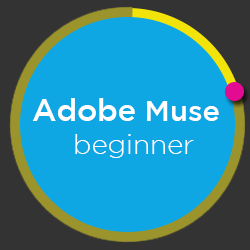
<style>
.page{position:relative;width:250px;height:250px;background:#0ea7e4}
.page>*{position:absolute;margin:0}
.t1{font:27.8px "GothamLight";color:#ffffff}
.t2{font:30.6px "GothamMedium";color:#ffffff}
.t3{font:29.2px "GothamMedium";color:#ffffff}
</style>
<div class="page">
<p class="t1" style="left:32px;top:98px;width:187px;height:60px"><span class="t2"> Adobe</span><span class="t3"> Muse    <br></span>      beginner</p>
</div>
